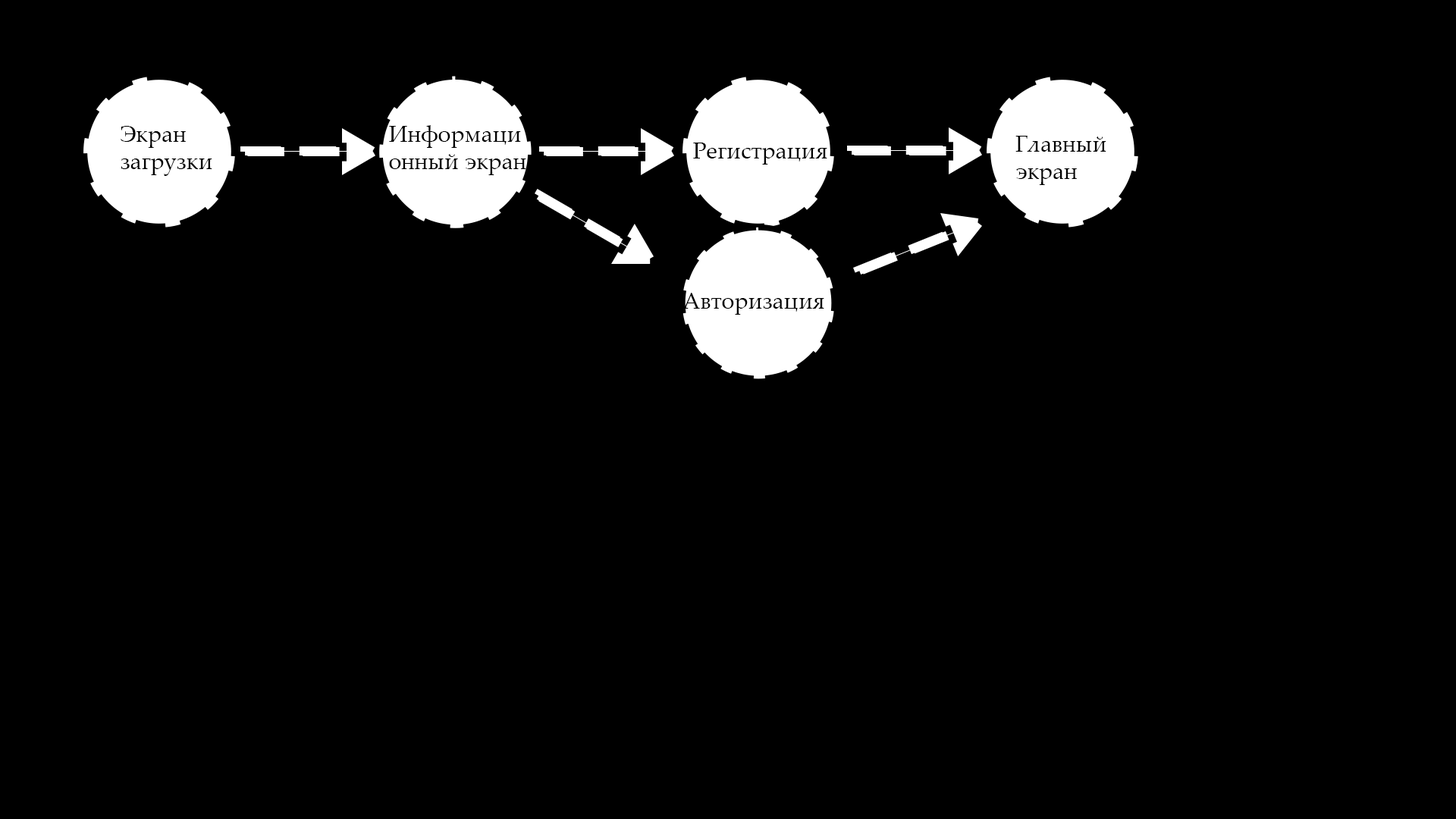
<style>
.page{position:relative;width:1456px;height:819px;background:#000000}
.page>*{position:absolute;margin:0}
.t1{font:22.7px "PalatinoLinotype-Roman";color:#000000}
</style>
<div class="page">
<p class="t1" style="left:121px;top:126px;width:91px;height:50px">Экран загрузки</p>
<p class="t1" style="left:389px;top:125px;width:137px;height:50px">Информационный экран</p>
<p class="t1" style="left:1015px;top:136px;width:91px;height:49px">Главный экран</p>
<p class="t1" style="left:693px;top:143px;width:134px;height:22px">Регистрация</p>
<p class="t1" style="left:682px;top:293px;width:142px;height:22px">Авторизация</p>
</div>
